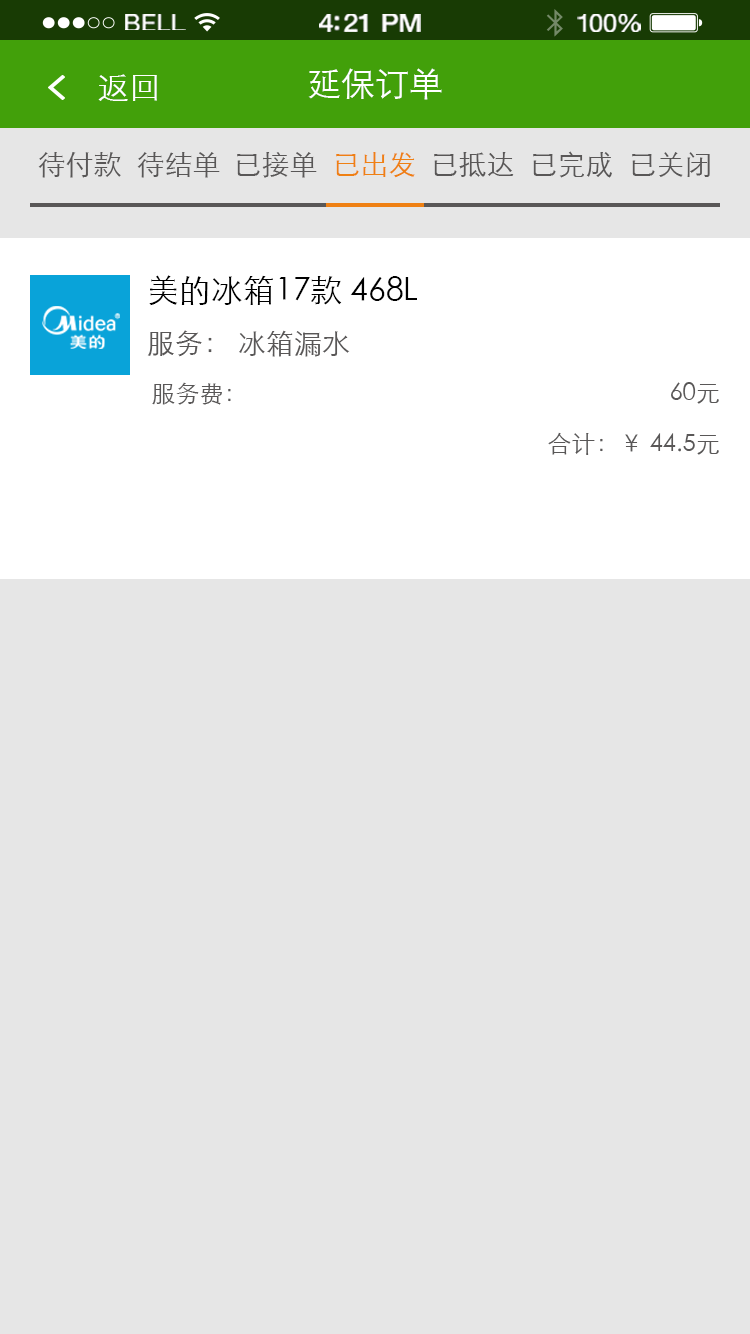
<style>
.page{position:relative;width:750px;height:1334px;background:#e6e6e6}
.page>*{position:absolute;margin:0}
.t1{font:23.3px "HelveticaNeue";letter-spacing:0.02em;color:#ffffff;scale:1.06 1}
.t2{font:25.3px "HelveticaNeue-Medium";letter-spacing:-0.02em;color:#ffffff;scale:1.06 1}
.t3{font:24.3px "HelveticaNeue";letter-spacing:-0.02em;color:#ffffff;scale:1.06 1}
.t4{font:32px "STXihei";color:#ffffff}
.t5{font:34px "STXihei";color:#ffffff}
.t6{font:28px "STXihei";color:#595757}
.t7{font:28px "STXihei";color:#ef8013}
.t8{font:32px/56px "STXihei";color:#000000}
.t9{font:28px/56px "STXihei";color:#595757}
.t10{font:24px "STXihei";color:#595757}
</style>
<div class="page">
<p class="t1" style="left:125px;top:14px;width:61px;height:16px">BELL</p>
<p class="t2" style="left:319px;top:14px;width:102px;height:18px">4:21 PM</p>
<p class="t3" style="left:577px;top:14px;width:64px;height:18px">100%</p>
<p class="t4" style="left:98px;top:74px;width:59px;height:27px">返回</p>
<p class="t5" style="left:308px;top:68px;width:134px;height:32px">延保订单</p>
<p class="t6" style="left:38px;top:152px;width:83px;height:26px">待付款</p>
<p class="t6" style="left:137px;top:152px;width:83px;height:26px">待结单</p>
<p class="t6" style="left:237px;top:152px;width:80px;height:26px">已接单</p>
<p class="t7" style="left:336px;top:152px;width:79px;height:26px">已出发</p>
<p class="t6" style="left:434px;top:152px;width:80px;height:25px">已抵达</p>
<p class="t6" style="left:533px;top:151px;width:79px;height:27px">已完成</p>
<p class="t6" style="left:632px;top:152px;width:78px;height:25px">已关闭</p>
<p class="t8" style="left:147px;top:275px;width:270px;height:82px">美的冰箱17款 468L <br><span class="t9">服务： 冰箱漏水</span></p>
<p class="t10" style="left:152px;top:382px;width:79px;height:23px">服务费：</p>
<p class="t10" style="left:671px;top:382px;width:48px;height:22px">60元</p>
<p class="t10" style="left:548px;top:432px;width:171px;height:23px">合计：￥ 44.5元</p>
</div>
